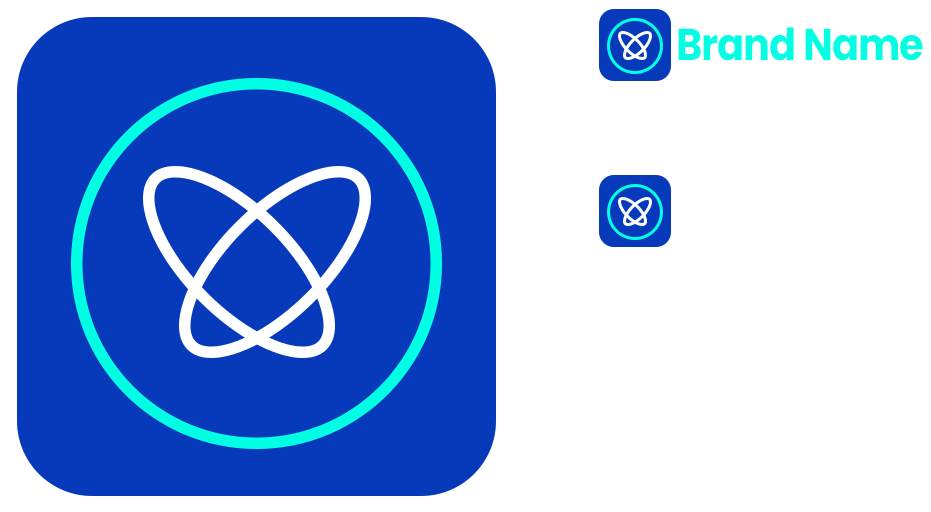
<style>
.page{position:relative;width:931px;height:512px;background:#ffffff}
.page>*{position:absolute;margin:0}
.t1{font:44.4px "Poppins-Bold";letter-spacing:-0.025em;color:#01ffe4;scale:0.9 1}
</style>
<div class="page">
<p class="t1" style="left:678px;top:27px;width:245px;height:34px">Brand Name</p>
</div>
